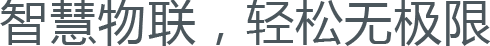
<style>
.page{position:relative;width:490px;height:46px;background:#ffffff}
.page>*{position:absolute;margin:0}
.t1{font:48px "MicrosoftYaHei";letter-spacing:0.025em;color:#4b565c}
</style>
<div class="page">
<p class="t1" style="left:0px;top:0px;width:491px;height:46px">智慧物联，轻松无极限</p>
</div>
